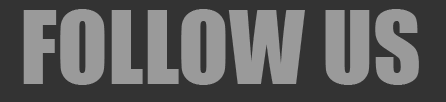
<style>
.page{position:relative;width:446px;height:102px;background:#333333}
.page>*{position:absolute;margin:0}
.t1{font:93px "Impact";color:#9a9a9a}
</style>
<div class="page">
<p class="t1" style="left:23px;top:9px;width:396px;height:76px">FOLLOW US</p>
</div>
